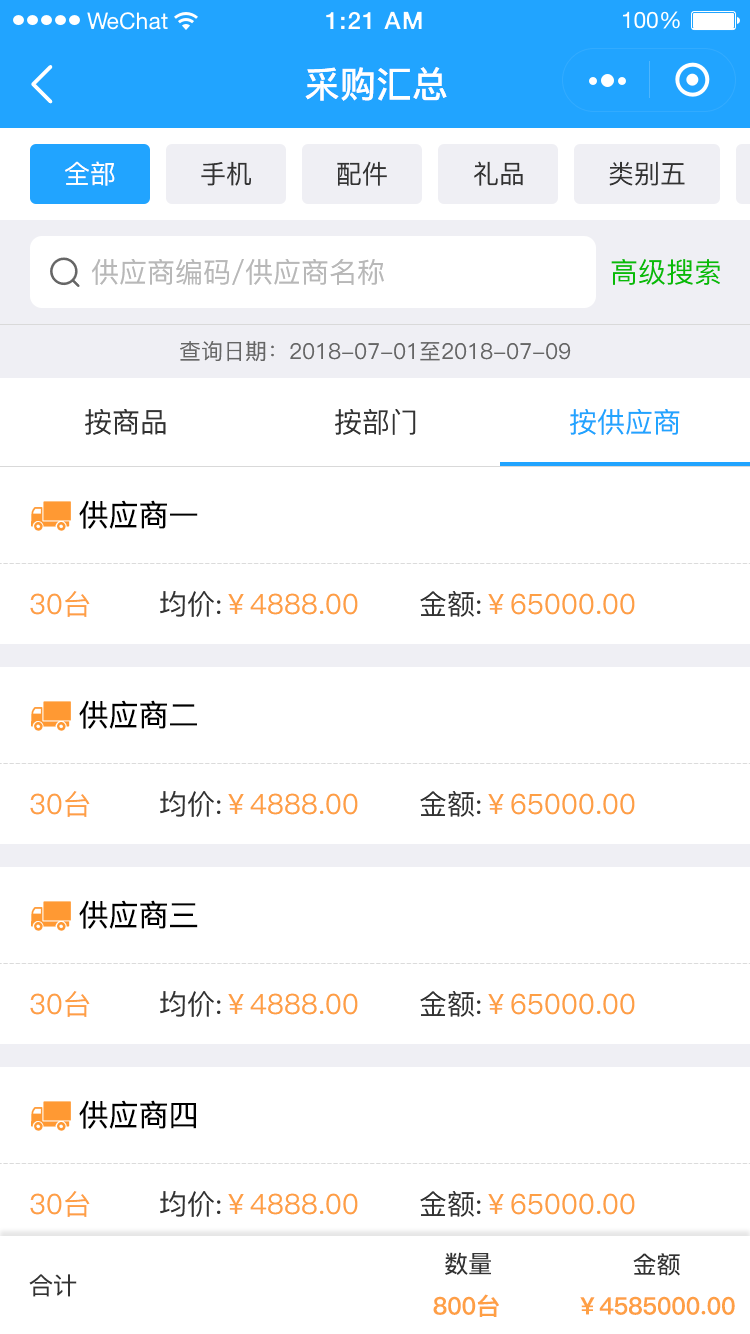
<style>
.page{position:relative;width:750px;height:1334px;background:#ffffff}
.page>*{position:absolute;margin:0}
.t1{font:36px "PingFang-SC-Bold";color:#ffffff}
.t2{font:26px "PingFang-SC-Medium";color:#ffffff}
.t3{font:26px "PingFang-SC-Medium";color:#333333}
.t4{font:28px "PingFang-SC-Medium";color:#b8b8b8}
.t5{font:28px "PingFang-SC-Medium";color:#09bb07}
.t6{font:22px "PingFang-SC-Medium";color:#666666}
.t7{font:28px "PingFang-SC-Medium";color:#333333}
.t8{font:28px "PingFang-SC-Medium";color:#21a4ff}
.t9{font:30px "PingFang-SC-Medium";color:#000000}
.t10{font:28px "PingFang-SC-Medium";color:#fe9f45}
.t11{font:24px "PingFang-SC-Medium";color:#333333}
.t12{font:24px "PingFang-SC-Bold";color:#fe9f45}
</style>
<div class="page">
<p class="t1" style="left:305px;top:67px;width:142px;height:34px">采购汇总</p>
<p class="t2" style="left:65px;top:161px;width:50px;height:25px">全部</p>
<p class="t3" style="left:201px;top:161px;width:50px;height:25px">手机</p>
<p class="t3" style="left:337px;top:161px;width:50px;height:25px">配件</p>
<p class="t3" style="left:474px;top:161px;width:49px;height:25px">礼品</p>
<p class="t3" style="left:609px;top:161px;width:76px;height:25px">类别五</p>
<p class="t4" style="left:91px;top:259px;width:293px;height:26px">供应商编码/供应商名称</p>
<p class="t5" style="left:611px;top:259px;width:109px;height:26px">高级搜索</p>
<p class="t6" style="left:180px;top:341px;width:391px;height:21px">查询日期：2018-07-01至2018-07-09</p>
<p class="t7" style="left:85px;top:409px;width:81px;height:26px">按商品</p>
<p class="t7" style="left:335px;top:409px;width:81px;height:26px">按部门</p>
<p class="t8" style="left:570px;top:409px;width:110px;height:26px">按供应商</p>
<p class="t9" style="left:79px;top:500px;width:119px;height:29px">供应商一</p>
<p class="t10" style="left:30px;top:591px;width:60px;height:26px">30台</p>
<p class="t10" style="left:160px;top:591px;width:198px;height:26px"><span class="t7">均价:</span>￥4888.00</p>
<p class="t10" style="left:420px;top:591px;width:215px;height:26px"><span class="t7">金额:</span>￥65000.00</p>
<p class="t9" style="left:79px;top:700px;width:118px;height:29px">供应商二</p>
<p class="t10" style="left:30px;top:791px;width:60px;height:26px">30台</p>
<p class="t10" style="left:160px;top:791px;width:198px;height:26px"><span class="t7">均价:</span>￥4888.00</p>
<p class="t10" style="left:420px;top:791px;width:215px;height:26px"><span class="t7">金额:</span>￥65000.00</p>
<p class="t9" style="left:79px;top:900px;width:119px;height:29px">供应商三</p>
<p class="t10" style="left:30px;top:991px;width:60px;height:26px">30台</p>
<p class="t10" style="left:160px;top:991px;width:198px;height:26px"><span class="t7">均价:</span>￥4888.00</p>
<p class="t10" style="left:420px;top:991px;width:215px;height:26px"><span class="t7">金额:</span>￥65000.00</p>
<p class="t9" style="left:79px;top:1100px;width:117px;height:29px">供应商四</p>
<p class="t10" style="left:30px;top:1191px;width:60px;height:26px">30台</p>
<p class="t10" style="left:160px;top:1191px;width:198px;height:26px"><span class="t7">均价:</span>￥4888.00</p>
<p class="t10" style="left:420px;top:1191px;width:215px;height:26px"><span class="t7">金额:</span>￥65000.00</p>
<p class="t11" style="left:445px;top:1252px;width:46px;height:23px">数量</p>
<p class="t11" style="left:633px;top:1253px;width:47px;height:23px">金额</p>
<p class="t11" style="left:29px;top:1274px;width:48px;height:23px">合计</p>
<p class="t12" style="left:433px;top:1294px;width:66px;height:23px">800台</p>
<p class="t12" style="left:580px;top:1296px;width:155px;height:19px">￥4585000.00</p>
</div>
